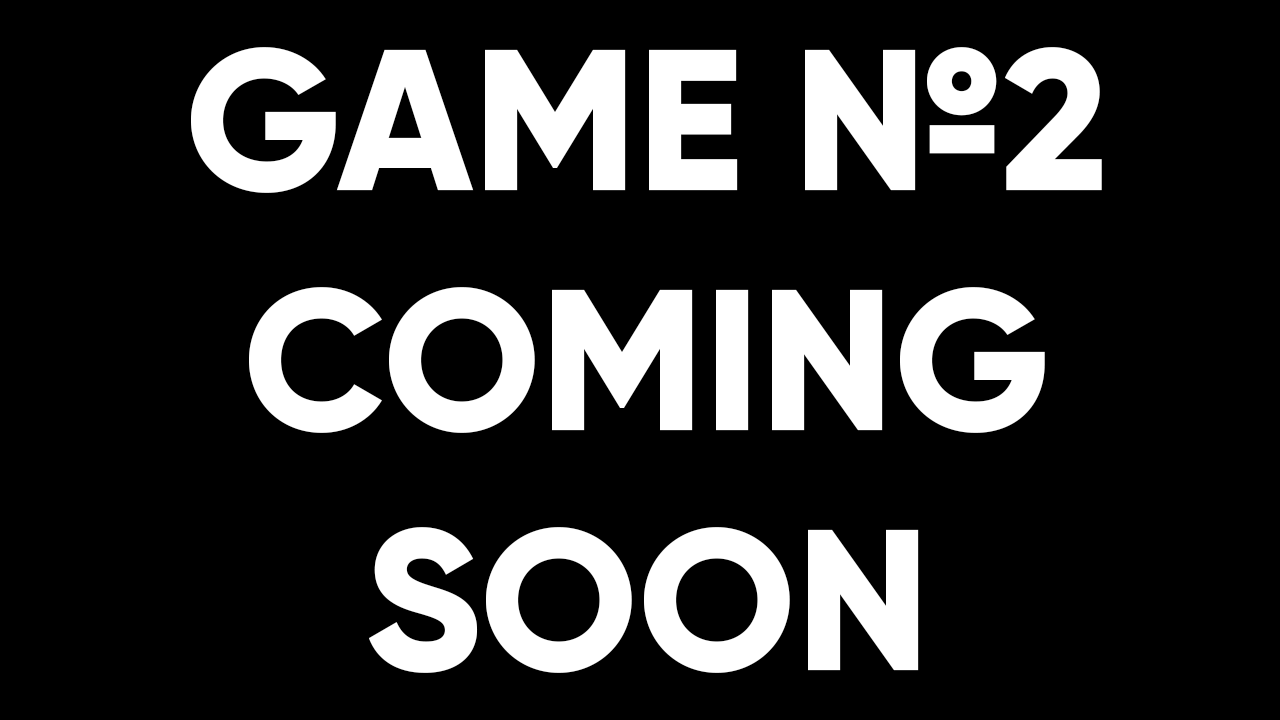
<style>
.page{position:relative;width:1280px;height:720px;background:#000000}
.page>*{position:absolute;margin:0}
.t1{font:200px "Gilroy-ExtraBold";color:#ffffff}
</style>
<div class="page">
<p class="t1" style="left:191px;top:47px;width:911px;height:626px;text-align:center">GAME №2<br>COMING<br>SOON</p>
</div>
